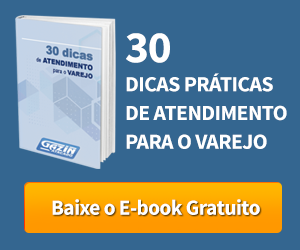
<style>
.page{position:relative;width:300px;height:250px;background:#346690}
.page>*{position:absolute;margin:0}
.t1{font:21.6px/28.8px "SourceSansPro-Bold";letter-spacing:-0.025em;color:#ffffff}
.t2{font:45px/28.8px "SourceSansPro-Bold";letter-spacing:-0.025em;color:#ffffff}
.t3{font:21.4px "SourceSansPro-Bold";letter-spacing:-0.025em;color:#ffffff}
</style>
<div class="page">
<p class="t1" style="left:126px;top:33px;width:161px;height:116px"><span class="t2">30<br></span>DICAS PRÁTICAS <br>DE ATENDIMENTO <br>PARA O VAREJO</p>
<p class="t3" style="left:52px;top:199px;width:208px;height:16px">Baixe o E-book Gratuito</p>
</div>
